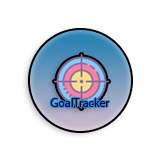
<style>
.page{position:relative;width:162px;height:162px;background:#ffffff}
.page>*{position:absolute;margin:0}
.t1{font:12px "MyriadPro-Regular";color:#010e22}
</style>
<div class="page">
<p class="t1" style="left:50px;top:98px;width:60px;height:9px">GoalTracker</p>
</div>
